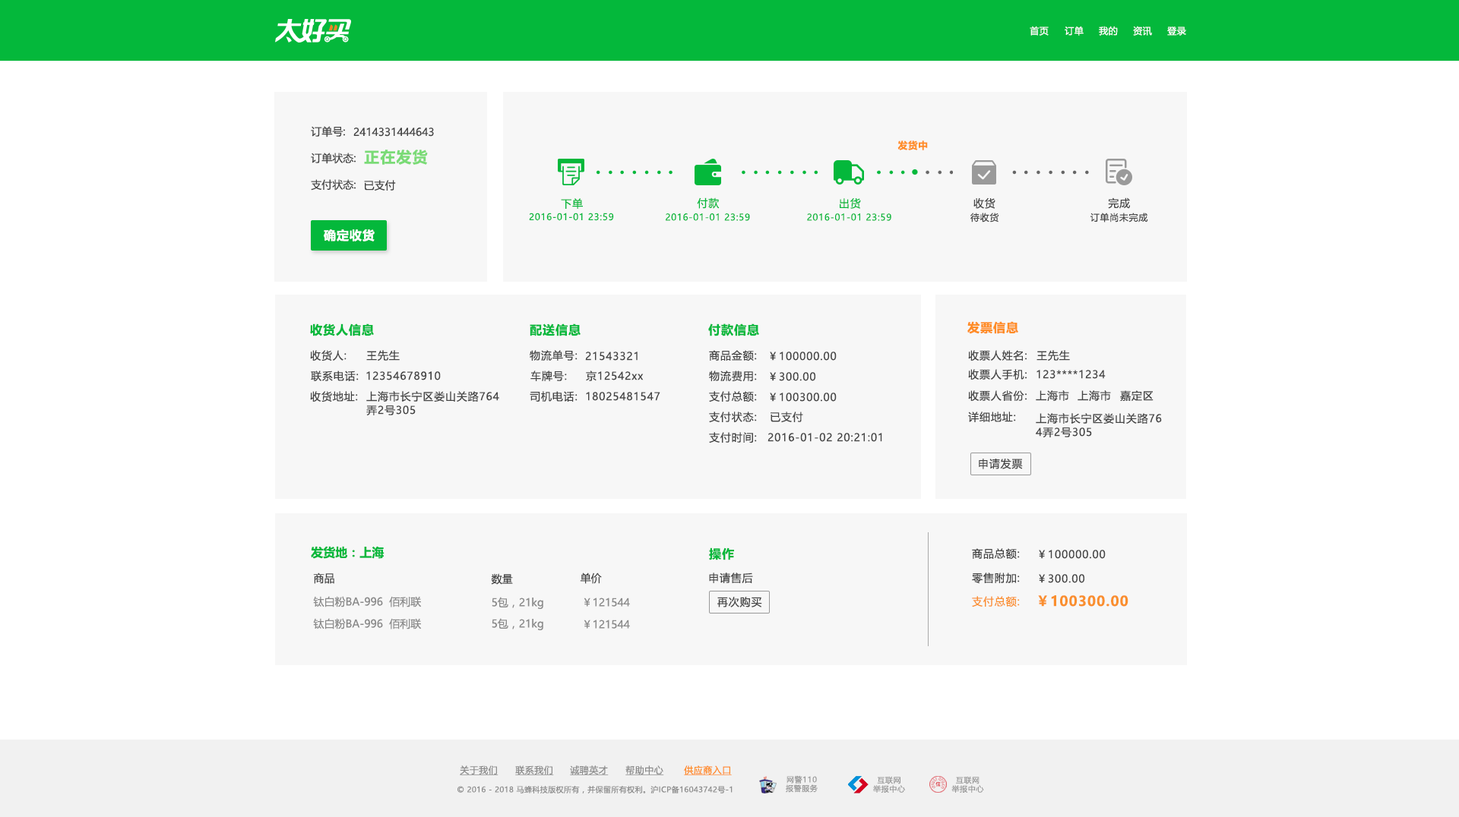
<style>
.page{position:relative;width:1459px;height:817px;background:#ffffff}
.page>*{position:absolute;margin:0}
.t1{font:9.1px "MicrosoftYaHeiUI";letter-spacing:0.04em;color:#ffffff}
.t2{font:10.6px "MicrosoftYaHeiUI";color:#444444}
.t3{font:15.2px "MicrosoftYaHeiUI-Bold";letter-spacing:0.06em;color:#7adb76}
.t4{font:9.6px "MicrosoftYaHeiUI-Bold";letter-spacing:0.06em;color:#ff8d27}
.t5{font:10.6px "MicrosoftYaHeiUI";letter-spacing:0.06em;color:#04b83b}
.t6{font:10.6px "MicrosoftYaHeiUI";letter-spacing:0.06em;color:#444444}
.t7{font:9.1px "MicrosoftYaHeiUI";letter-spacing:0.06em;color:#04b83b}
.t8{font:9.1px "MicrosoftYaHeiUI";letter-spacing:0.06em;color:#444444}
.t9{font:12.2px "MicrosoftYaHeiUI-Bold";letter-spacing:0.06em;color:#ffffff}
.t10{font:12.2px "MicrosoftYaHeiUI-Bold";letter-spacing:0.06em;color:#04b83b}
.t11{font:12.2px "MicrosoftYaHeiUI-Bold";letter-spacing:0.06em;color:#ff8d27}
.t12{font:10.6px/13.7px "MicrosoftYaHeiUI";letter-spacing:0.06em;color:#444444}
.t13{font:12.2px "MicrosoftYaHeiUI-Bold";color:#04b83b}
.t14{font:10.6px "MicrosoftYaHeiUI";color:#8a8a8a}
.t15{font:10.6px "MicrosoftYaHeiUI";letter-spacing:0.06em;color:#fa8f2e}
.t16{font:13.7px "MicrosoftYaHeiUI-Bold";letter-spacing:0.06em;color:#fa8f2e}
.t17{font:9.1px "MicrosoftYaHeiUI";letter-spacing:0.04em;color:#8c8c8c;text-decoration:underline}
.t18{font:9.1px "MicrosoftYaHeiUI";letter-spacing:0.04em;color:#ff8b25;text-decoration:underline}
.t19{font:7.6px "MicrosoftYaHeiUI";letter-spacing:0.04em;color:#8c8c8c}
.t20{font:7.6px/8.8px "MicrosoftYaHei";letter-spacing:0.06em;color:#999999}
</style>
<div class="page">
<p class="t1" style="left:1029px;top:26px;width:19px;height:10px">首页</p>
<p class="t1" style="left:1064px;top:26px;width:19px;height:10px">订单</p>
<p class="t1" style="left:1099px;top:26px;width:19px;height:10px">我的</p>
<p class="t1" style="left:1133px;top:26px;width:19px;height:10px">资讯</p>
<p class="t1" style="left:1167px;top:27px;width:19px;height:9px">登录</p>
<p class="t2" style="left:311px;top:126px;width:34px;height:12px">订单号:</p>
<p class="t2" style="left:353px;top:128px;width:81px;height:9px">2414331444643</p>
<p class="t3" style="left:364px;top:150px;width:64px;height:15px">正在发货</p>
<p class="t4" style="left:897px;top:141px;width:31px;height:9px">发货中</p>
<p class="t2" style="left:311px;top:153px;width:45px;height:11px">订单状态:</p>
<p class="t2" style="left:311px;top:179px;width:45px;height:12px">支付状态:</p>
<p class="t2" style="left:364px;top:180px;width:32px;height:11px">已支付</p>
<p class="t5" style="left:697px;top:198px;width:22px;height:11px">付款</p>
<p class="t6" style="left:973px;top:198px;width:22px;height:11px">收货</p>
<p class="t6" style="left:1108px;top:198px;width:22px;height:11px">完成</p>
<p class="t5" style="left:561px;top:198px;width:22px;height:11px">下单</p>
<p class="t5" style="left:840px;top:198px;width:21px;height:11px">出货</p>
<p class="t7" style="left:529px;top:213px;width:85px;height:8px">2016-01-01 23:59</p>
<p class="t7" style="left:666px;top:213px;width:84px;height:8px">2016-01-01 23:59</p>
<p class="t7" style="left:807px;top:213px;width:84px;height:8px">2016-01-01 23:59</p>
<p class="t8" style="left:970px;top:213px;width:29px;height:10px">待收货</p>
<p class="t8" style="left:1090px;top:213px;width:58px;height:10px">订单尚未完成</p>
<p class="t9" style="left:324px;top:229px;width:51px;height:13px">确定收货</p>
<p class="t10" style="left:310px;top:324px;width:64px;height:13px">收货人信息</p>
<p class="t10" style="left:530px;top:324px;width:50px;height:13px">配送信息</p>
<p class="t10" style="left:708px;top:324px;width:51px;height:13px">付款信息</p>
<p class="t11" style="left:967px;top:321px;width:51px;height:13px">发票信息</p>
<p class="t6" style="left:310px;top:350px;width:36px;height:12px">收货人:</p>
<p class="t6" style="left:366px;top:350px;width:34px;height:11px">王先生</p>
<p class="t6" style="left:530px;top:350px;width:47px;height:11px">物流单号:</p>
<p class="t6" style="left:585px;top:352px;width:52px;height:9px">21543321</p>
<p class="t6" style="left:709px;top:350px;width:48px;height:12px">商品金额:</p>
<p class="t6" style="left:770px;top:352px;width:66px;height:9px">￥100000.00</p>
<p class="t6" style="left:968px;top:350px;width:58px;height:11px">收票人姓名:</p>
<p class="t6" style="left:1036px;top:350px;width:34px;height:11px">王先生</p>
<p class="t6" style="left:311px;top:371px;width:48px;height:10px">联系电话:</p>
<p class="t6" style="left:366px;top:372px;width:75px;height:9px">12354678910</p>
<p class="t6" style="left:530px;top:371px;width:37px;height:10px">车牌号:</p>
<p class="t6" style="left:586px;top:371px;width:57px;height:10px">京12542xx</p>
<p class="t6" style="left:709px;top:371px;width:48px;height:11px">物流费用:</p>
<p class="t6" style="left:770px;top:372px;width:45px;height:9px">￥300.00</p>
<p class="t6" style="left:968px;top:369px;width:58px;height:12px">收票人手机:</p>
<p class="t6" style="left:1036px;top:370px;width:69px;height:9px">123****1234</p>
<p class="t6" style="left:310px;top:391px;width:48px;height:12px">收货地址:</p>
<p class="t12" style="left:366px;top:391px;width:133px;height:25px">上海市长宁区娄山关路764<br>弄2号305</p>
<p class="t6" style="left:530px;top:391px;width:47px;height:12px">司机电话:</p>
<p class="t6" style="left:586px;top:392px;width:74px;height:9px">18025481547</p>
<p class="t6" style="left:709px;top:391px;width:48px;height:12px">支付总额:</p>
<p class="t6" style="left:770px;top:393px;width:66px;height:9px">￥100300.00</p>
<p class="t6" style="left:968px;top:391px;width:58px;height:10px">收票人省份:</p>
<p class="t6" style="left:1036px;top:391px;width:33px;height:10px">上海市</p>
<p class="t6" style="left:1077px;top:391px;width:34px;height:10px">上海市</p>
<p class="t6" style="left:1120px;top:391px;width:33px;height:11px">嘉定区</p>
<p class="t6" style="left:709px;top:412px;width:48px;height:11px">支付状态:</p>
<p class="t6" style="left:770px;top:412px;width:33px;height:11px">已支付</p>
<p class="t6" style="left:968px;top:412px;width:48px;height:10px">详细地址:</p>
<p class="t12" style="left:1036px;top:413px;width:126px;height:25px">上海市长宁区娄山关路76<br>4弄2号305</p>
<p class="t6" style="left:709px;top:432px;width:48px;height:12px">支付时间:</p>
<p class="t6" style="left:767px;top:433px;width:115px;height:9px">2016-01-02 20:21:01</p>
<p class="t6" style="left:979px;top:459px;width:44px;height:11px">申请发票</p>
<p class="t13" style="left:311px;top:546px;width:73px;height:13px">发货地：上海</p>
<p class="t10" style="left:709px;top:548px;width:25px;height:13px">操作</p>
<p class="t6" style="left:972px;top:549px;width:48px;height:11px">商品总额:</p>
<p class="t6" style="left:1039px;top:550px;width:66px;height:9px">￥100000.00</p>
<p class="t2" style="left:313px;top:573px;width:21px;height:11px">商品</p>
<p class="t2" style="left:491px;top:574px;width:22px;height:11px">数量</p>
<p class="t2" style="left:580px;top:573px;width:22px;height:11px">单价</p>
<p class="t6" style="left:709px;top:573px;width:44px;height:10px">申请售后</p>
<p class="t6" style="left:972px;top:573px;width:48px;height:11px">零售附加:</p>
<p class="t6" style="left:1039px;top:574px;width:45px;height:9px">￥300.00</p>
<p class="t14" style="left:313px;top:596px;width:109px;height:12px">钛白粉BA-996  佰利联</p>
<p class="t14" style="left:492px;top:597px;width:51px;height:12px">5包，21kg</p>
<p class="t14" style="left:583px;top:598px;width:47px;height:9px">￥121544</p>
<p class="t6" style="left:717px;top:597px;width:45px;height:11px">再次购买</p>
<p class="t15" style="left:972px;top:596px;width:48px;height:12px">支付总额:</p>
<p class="t16" style="left:1038px;top:596px;width:90px;height:11px">￥100300.00</p>
<p class="t14" style="left:313px;top:618px;width:109px;height:12px">钛白粉BA-996  佰利联</p>
<p class="t14" style="left:492px;top:618px;width:51px;height:13px">5包，21kg</p>
<p class="t14" style="left:583px;top:620px;width:47px;height:9px">￥121544</p>
<p class="t17" style="left:460px;top:766px;width:38px;height:10px">关于我们</p>
<p class="t17" style="left:515px;top:766px;width:39px;height:10px">联系我们</p>
<p class="t17" style="left:570px;top:766px;width:39px;height:10px">诚聘英才</p>
<p class="t17" style="left:625px;top:766px;width:39px;height:10px">帮助中心</p>
<p class="t18" style="left:684px;top:766px;width:48px;height:10px">供应商入口</p>
<p class="t19" style="left:457px;top:786px;width:275px;height:8px">© 2016 - 2018 马蜂科技版权所有，并保留所有权利。沪ICP备16043742号-1</p>
<p class="t20" style="left:786px;top:776px;width:31px;height:17px;text-align:center">网警110<br>报警服务</p>
<p class="t20" style="left:873px;top:776px;width:32px;height:17px;text-align:center">互联网<br>举报中心</p>
<p class="t20" style="left:951px;top:776px;width:33px;height:17px;text-align:center">互联网<br>举报中心</p>
</div>
